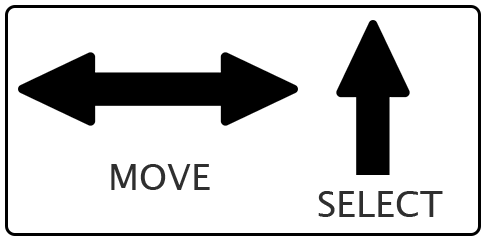
<style>
.page{position:relative;width:486px;height:239px;background:#ffffff}
.page>*{position:absolute;margin:0}
.t1{font:36px "LucidaSansUnicode";color:#2f2f2f}
</style>
<div class="page">
<p class="t1" style="left:111px;top:164px;width:99px;height:26px">MOVE</p>
<p class="t1" style="left:318px;top:191px;width:125px;height:26px">SELECT</p>
</div>
